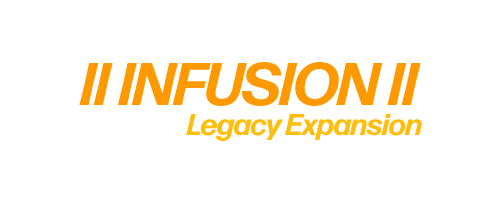
<style>
.page{position:relative;width:500px;height:200px;background:#ffffff}
.page>*{position:absolute;margin:0}
.t1{font:60px "FormaDJRDisplay-BoldItalic";color:#ff9900}
.t2{font:30px "FormaDJRDisplay-BoldItalic";color:#ffbd0d}
</style>
<div class="page">
<p class="t1" style="left:79px;top:62px;width:342px;height:44px">II INFUSION II</p>
<p class="t2" style="left:186px;top:114px;width:236px;height:27px">Legacy Expansion</p>
</div>
